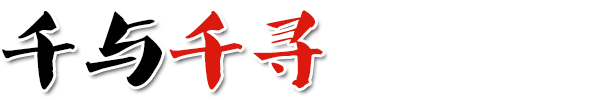
<style>
.page{position:relative;width:600px;height:100px;background:#ffffff}
.page>*{position:absolute;margin:0}
.t1{font:83.8px "-";color:#000000}
.t2{font:83.8px "-";color:#db190d}
</style>
<div class="page">
<p class="t1" style="left:1px;top:10px;width:322px;height:80px">千与<span class="t2">千寻</span></p>
</div>
